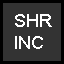
<style>
.page{position:relative;width:64px;height:64px;background:#333333}
.page>*{position:absolute;margin:0}
.t1{font:18px "ArialMT";color:#ffffff}
</style>
<div class="page">
<p class="t1" style="left:15px;top:14px;width:37px;height:35px">SHR<br>INC</p>
</div>
